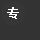
<style>
.page{position:relative;width:40px;height:40px;background:#333333}
.page>*{position:absolute;margin:0}
.t1{font:12px "SimSun";color:#ffffff;font-weight:bold}
</style>
<div class="page">
<p class="t1" style="left:7px;top:7px;width:12px;height:12px">专</p>
</div>
